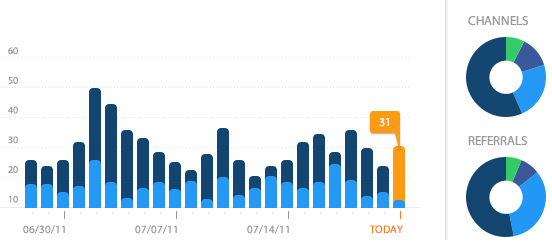
<style>
.page{position:relative;width:552px;height:242px;background:#ffffff}
.page>*{position:absolute;margin:0}
.t1{font:13px "MyriadPro-Regular";color:#999999}
.t2{font:10px/29.7px "MyriadPro-Regular";color:#999999}
.t3{font:12px "MyriadPro-Regular";color:#ffffff}
.t4{font:11px "MyriadPro-Regular";color:#999999}
.t5{font:11px "MyriadPro-Regular";color:#fe7f13}
</style>
<div class="page">
<p class="t1" style="left:468px;top:16px;width:60px;height:10px">CHANNELS</p>
<p class="t2" style="left:8px;top:47px;width:10px;height:156px;text-align:right">60<br>50<br>40<br>30<br>20<br>10</p>
<p class="t3" style="left:379px;top:118px;width:10px;height:9px">31</p>
<p class="t1" style="left:468px;top:136px;width:59px;height:10px">REFERRALS</p>
<p class="t4" style="left:23px;top:225px;width:42px;height:9px">06/30/11</p>
<p class="t4" style="left:135px;top:225px;width:42px;height:9px">07/07/11</p>
<p class="t4" style="left:247px;top:225px;width:42px;height:9px">07/14/11</p>
<p class="t5" style="left:369px;top:225px;width:34px;height:9px">TODAY</p>
</div>
